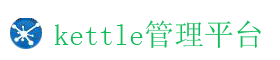
<style>
.page{position:relative;width:280px;height:60px;background:#ffffff}
.page>*{position:absolute;margin:0}
.t1{font:30px "SimSun";color:#14bd5c}
</style>
<div class="page">
<p class="t1" style="left:54px;top:20px;width:207px;height:29px">kettle管理平台</p>
</div>
